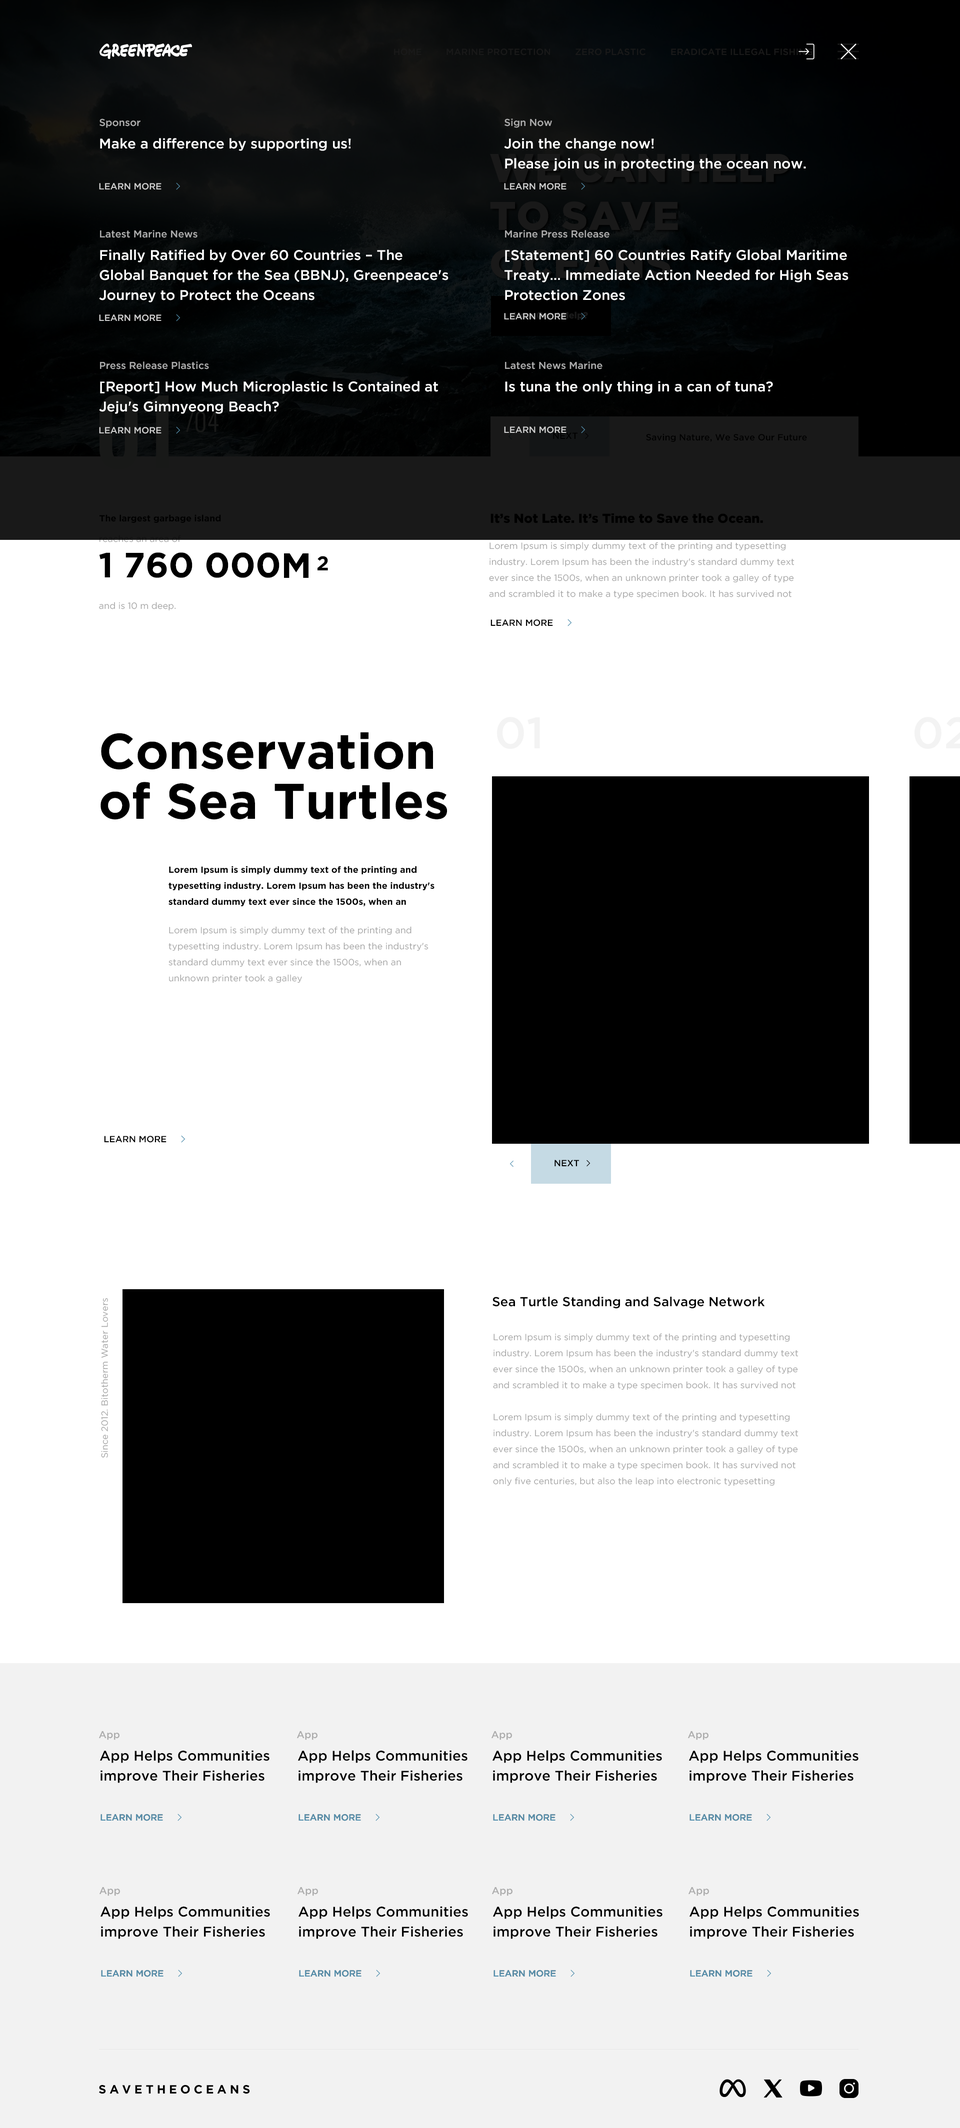
<style>
.page{position:relative;width:960px;height:2128px;background:#ffffff}
.page>*{position:absolute;margin:0}
.t1{font:9px "GothamPro-Medium";color:#191919}
.t2{font:9px "GothamPro-Medium";color:#191919;text-transform:uppercase}
.t3{font:10px "GothamPro-Medium";color:#acacac}
.t4{font:14px "GothamPro-Medium";color:#ffffff}
.t5{font:14px/20px "GothamPro-Medium";color:#ffffff}
.t6{font:9px "GothamPro-Medium";color:#cccccc}
.t7{font:25px "Oswald-Light";color:#181918}
.t8{font:9px "GothamPro-Medium";color:#000000}
.t9{font:9px "GothamPro-Bold";color:#000000}
.t10{font:13px "GothamPro-Black";color:#000000}
.t11{font:9px/16px "GothamPro";color:#a6a6a6}
.t12{font:35px "GothamPro-Bold";color:#000000}
.t13{font:20px "GothamPro-Bold";color:#000000}
.t14{font:9px "GothamPro";color:#a6a6a6}
.t15{font:44px "GothamPro-Medium";color:#f3f3f3}
.t16{font:50px/50px "GothamPro-Bold";color:#000000}
.t17{font:9px/16px "GothamPro-Bold";color:#000000}
.t18{font:13px "GothamPro-Medium";color:#000000}
.t19{font:14px/20px "GothamPro-Medium";color:#000000}
.t20{font:9px "GothamPro-Medium";color:#5591af}
.t21{font:12px "GothamPro-Bold";letter-spacing:0.25em;color:#000000;text-transform:uppercase}
</style>
<div class="page">
<p class="t1" style="left:394px;top:48px;width:28px;height:8px">HOME</p>
<p class="t2" style="left:446px;top:48px;width:104px;height:8px">Marine protection</p>
<p class="t2" style="left:576px;top:48px;width:70px;height:8px">Zero plastic</p>
<p class="t2" style="left:671px;top:48px;width:141px;height:8px">Eradicate illegal fishing</p>
<p class="t3" style="left:100px;top:118px;width:40px;height:10px">Sponsor</p>
<p class="t3" style="left:504px;top:118px;width:48px;height:10px">Sign Now</p>
<p class="t4" style="left:100px;top:138px;width:251px;height:13px">Make a difference by supporting us!</p>
<p class="t5" style="left:504px;top:138px;width:302px;height:33px">Join the change now!<br>Please join us in protecting the ocean now.</p>
<p class="t6" style="left:99px;top:183px;width:63px;height:7px">LEARN MORE</p>
<p class="t6" style="left:504px;top:183px;width:62px;height:7px">LEARN MORE</p>
<p class="t3" style="left:100px;top:230px;width:98px;height:8px">Latest Marine News</p>
<p class="t3" style="left:505px;top:230px;width:105px;height:8px">Marine Press Release</p>
<p class="t5" style="left:99px;top:250px;width:349px;height:52px">Finally Ratified by Over 60 Countries – The Global Banquet for the Sea (BBNJ), Greenpeace's Journey to Protect the Oceans</p>
<p class="t5" style="left:504px;top:250px;width:344px;height:50px">[Statement] 60 Countries Ratify Global Maritime Treaty… Immediate Action Needed for High Seas Protection Zones</p>
<p class="t6" style="left:99px;top:314px;width:63px;height:8px">LEARN MORE</p>
<p class="t6" style="left:504px;top:313px;width:62px;height:7px">LEARN MORE</p>
<p class="t3" style="left:100px;top:362px;width:109px;height:8px">Press Release Plastics</p>
<p class="t3" style="left:505px;top:362px;width:97px;height:8px">Latest News Marine</p>
<p class="t5" style="left:99px;top:381px;width:339px;height:33px">[Report] How Much Microplastic Is Contained at Jeju's Gimnyeong Beach?</p>
<p class="t4" style="left:505px;top:381px;width:268px;height:13px">Is tuna the only thing in a can of tuna?</p>
<p class="t7" style="left:186px;top:412px;width:32px;height:20px">/04</p>
<p class="t6" style="left:99px;top:427px;width:63px;height:7px">LEARN MORE</p>
<p class="t6" style="left:504px;top:426px;width:62px;height:8px">LEARN MORE</p>
<p class="t8" style="left:553px;top:432px;width:25px;height:7px">NEXT</p>
<p class="t8" style="left:646px;top:434px;width:161px;height:8px">Saving Nature, We Save Our Future</p>
<p class="t9" style="left:100px;top:514px;width:121px;height:9px">The largest garbage island</p>
<p class="t10" style="left:490px;top:514px;width:273px;height:10px">It’s Not Late. It’s Time to Save the Ocean.</p>
<p class="t11" style="left:489px;top:542px;width:305px;height:56px">Lorem Ipsum is simply dummy text of the printing and typesetting industry. Lorem Ipsum has been the industry's standard dummy text ever since the 1500s, when an unknown printer took a galley of type and scrambled it to make a type specimen book. It has survived not only five centuries, but also the leap into electronic typesetting</p>
<p class="t12" style="left:99px;top:552px;width:181px;height:26px">1 760 000</p>
<p class="t12" style="left:284px;top:554px;width:24px;height:24px">M</p>
<p class="t13" style="left:318px;top:556px;width:10px;height:14px">2</p>
<p class="t14" style="left:99px;top:602px;width:77px;height:9px">and is 10 m deep.</p>
<p class="t8" style="left:490px;top:620px;width:63px;height:6px">LEARN MORE</p>
<p class="t15" style="left:497px;top:717px;width:43px;height:32px">01</p>
<p class="t16" style="left:100px;top:732px;width:347px;height:88px">Conservation of Sea Turtles</p>
<p class="t17" style="left:168px;top:866px;width:266px;height:40px">Lorem Ipsum is simply dummy text of the printing and typesetting industry. Lorem Ipsum has been the industry's standard dummy text ever since the 1500s, when an</p>
<p class="t11" style="left:168px;top:926px;width:260px;height:58px">Lorem Ipsum is simply dummy text of the printing and typesetting industry. Lorem Ipsum has been the industry's standard dummy text ever since the 1500s, when an unknown printer took a galley</p>
<p class="t8" style="left:104px;top:1136px;width:62px;height:7px">LEARN MORE</p>
<p class="t8" style="left:554px;top:1160px;width:25px;height:6px">NEXT</p>
<p class="t14" style="left:101px;top:1298px;width:7px;height:160px;rotate:-90deg">Since 2012. Bitotherm Water Lovers</p>
<p class="t18" style="left:492px;top:1297px;width:273px;height:12px">Sea Turtle Standing and Salvage Network</p>
<p class="t11" style="left:493px;top:1334px;width:305px;height:56px">Lorem Ipsum is simply dummy text of the printing and typesetting industry. Lorem Ipsum has been the industry's standard dummy text ever since the 1500s, when an unknown printer took a galley of type and scrambled it to make a type specimen book. It has survived not only five centuries, but also the leap into electronic typesetting</p>
<p class="t11" style="left:493px;top:1414px;width:305px;height:72px">Lorem Ipsum is simply dummy text of the printing and typesetting industry. Lorem Ipsum has been the industry's standard dummy text ever since the 1500s, when an unknown printer took a galley of type and scrambled it to make a type specimen book. It has survived not only five centuries, but also the leap into electronic typesetting</p>
<p class="t3" style="left:99px;top:1732px;width:21px;height:8px">App</p>
<p class="t3" style="left:297px;top:1732px;width:21px;height:8px">App</p>
<p class="t3" style="left:492px;top:1732px;width:20px;height:8px">App</p>
<p class="t3" style="left:688px;top:1732px;width:20px;height:8px">App</p>
<p class="t19" style="left:100px;top:1750px;width:170px;height:34px">App Helps Communities<br>improve Their Fisheries</p>
<p class="t19" style="left:298px;top:1750px;width:170px;height:34px">App Helps Communities<br>improve Their Fisheries</p>
<p class="t19" style="left:492px;top:1750px;width:170px;height:34px">App Helps Communities<br>improve Their Fisheries</p>
<p class="t19" style="left:689px;top:1750px;width:169px;height:34px">App Helps Communities<br>improve Their Fisheries</p>
<p class="t20" style="left:100px;top:1814px;width:63px;height:8px">LEARN MORE</p>
<p class="t20" style="left:100px;top:1814px;width:63px;height:8px">LEARN MORE</p>
<p class="t20" style="left:298px;top:1814px;width:63px;height:8px">LEARN MORE</p>
<p class="t20" style="left:298px;top:1814px;width:63px;height:8px">LEARN MORE</p>
<p class="t20" style="left:493px;top:1814px;width:63px;height:8px">LEARN MORE</p>
<p class="t20" style="left:493px;top:1814px;width:63px;height:8px">LEARN MORE</p>
<p class="t20" style="left:690px;top:1814px;width:62px;height:8px">LEARN MORE</p>
<p class="t20" style="left:690px;top:1814px;width:62px;height:8px">LEARN MORE</p>
<p class="t3" style="left:100px;top:1888px;width:20px;height:8px">App</p>
<p class="t3" style="left:298px;top:1888px;width:20px;height:8px">App</p>
<p class="t3" style="left:492px;top:1888px;width:20px;height:8px">App</p>
<p class="t3" style="left:688px;top:1888px;width:21px;height:8px">App</p>
<p class="t19" style="left:100px;top:1906px;width:170px;height:34px">App Helps Communities<br>improve Their Fisheries</p>
<p class="t19" style="left:298px;top:1906px;width:170px;height:34px">App Helps Communities<br>improve Their Fisheries</p>
<p class="t19" style="left:493px;top:1906px;width:169px;height:34px">App Helps Communities<br>improve Their Fisheries</p>
<p class="t19" style="left:690px;top:1906px;width:169px;height:34px">App Helps Communities<br>improve Their Fisheries</p>
<p class="t20" style="left:101px;top:1970px;width:63px;height:8px">LEARN MORE</p>
<p class="t20" style="left:101px;top:1970px;width:63px;height:8px">LEARN MORE</p>
<p class="t20" style="left:299px;top:1970px;width:63px;height:8px">LEARN MORE</p>
<p class="t20" style="left:299px;top:1970px;width:63px;height:8px">LEARN MORE</p>
<p class="t20" style="left:494px;top:1970px;width:62px;height:8px">LEARN MORE</p>
<p class="t20" style="left:494px;top:1970px;width:62px;height:8px">LEARN MORE</p>
<p class="t20" style="left:690px;top:1970px;width:62px;height:8px">LEARN MORE</p>
<p class="t20" style="left:690px;top:1970px;width:62px;height:8px">LEARN MORE</p>
<p class="t21" style="left:99px;top:2086px;width:151px;height:8px">savetheoceans</p>
</div>
